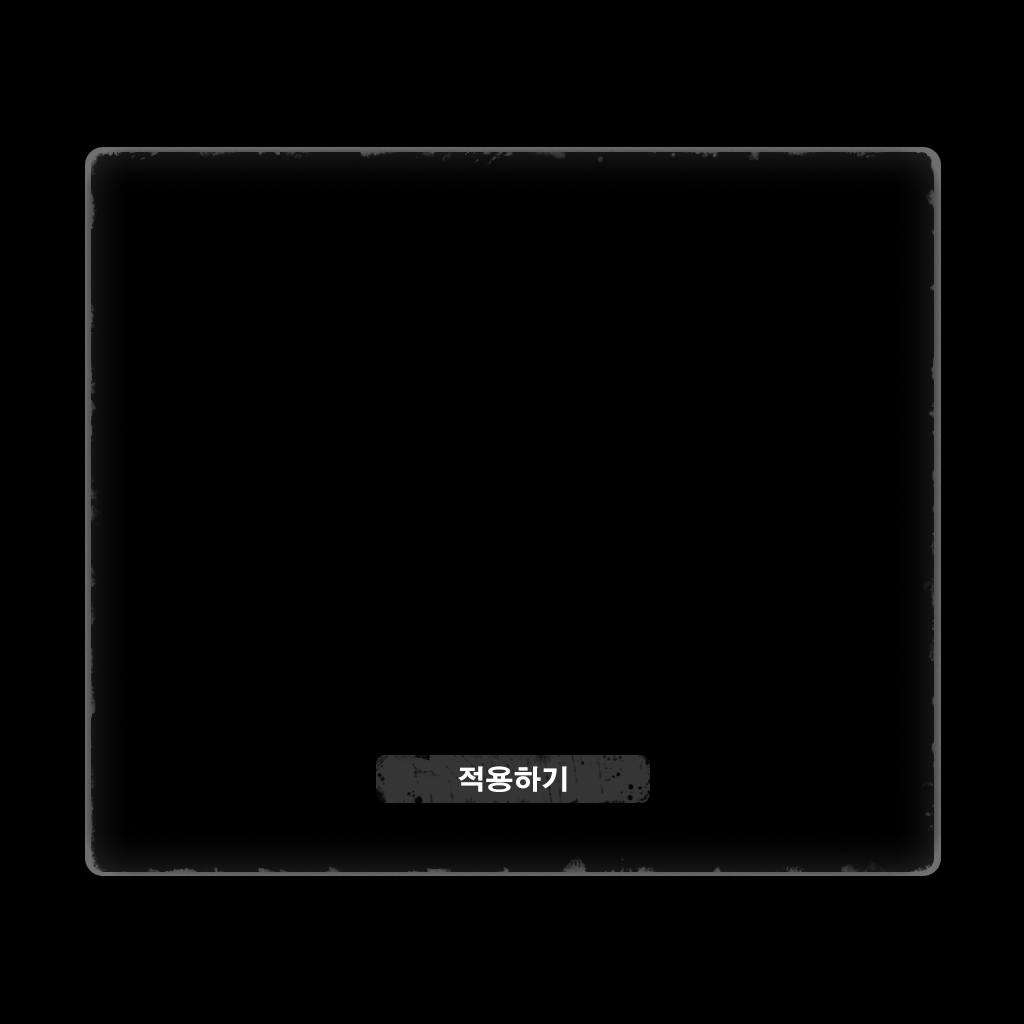
<style>
.page{position:relative;width:1024px;height:1024px;background:#000000}
.page>*{position:absolute;margin:0}
.t1{font:27px "HYgtrE";color:#ffffff;scale:1.04 1}
</style>
<div class="page">
<p class="t1" style="left:458px;top:766px;width:109px;height:26px">적용하기</p>
</div>
